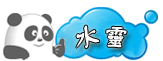
<style>
.page{position:relative;width:163px;height:61px;background:#ffffff}
.page>*{position:absolute;margin:0}
.t1{font:24.9px "ShutontiCSEG-Bold-T-GB";color:#fcfcfc}
</style>
<div class="page">
<p class="t1" style="left:76px;top:25px;width:51px;height:24px">水灵</p>
</div>
